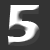
<style>
.page{position:relative;width:50px;height:50px;background:#333333}
.page>*{position:absolute;margin:0}
.t1{font:60px "ErasITC-Bold"}
</style>
<div class="page">
<p class="t1" style="left:7px;top:5px;width:33px;height:41px">5</p>
</div>
